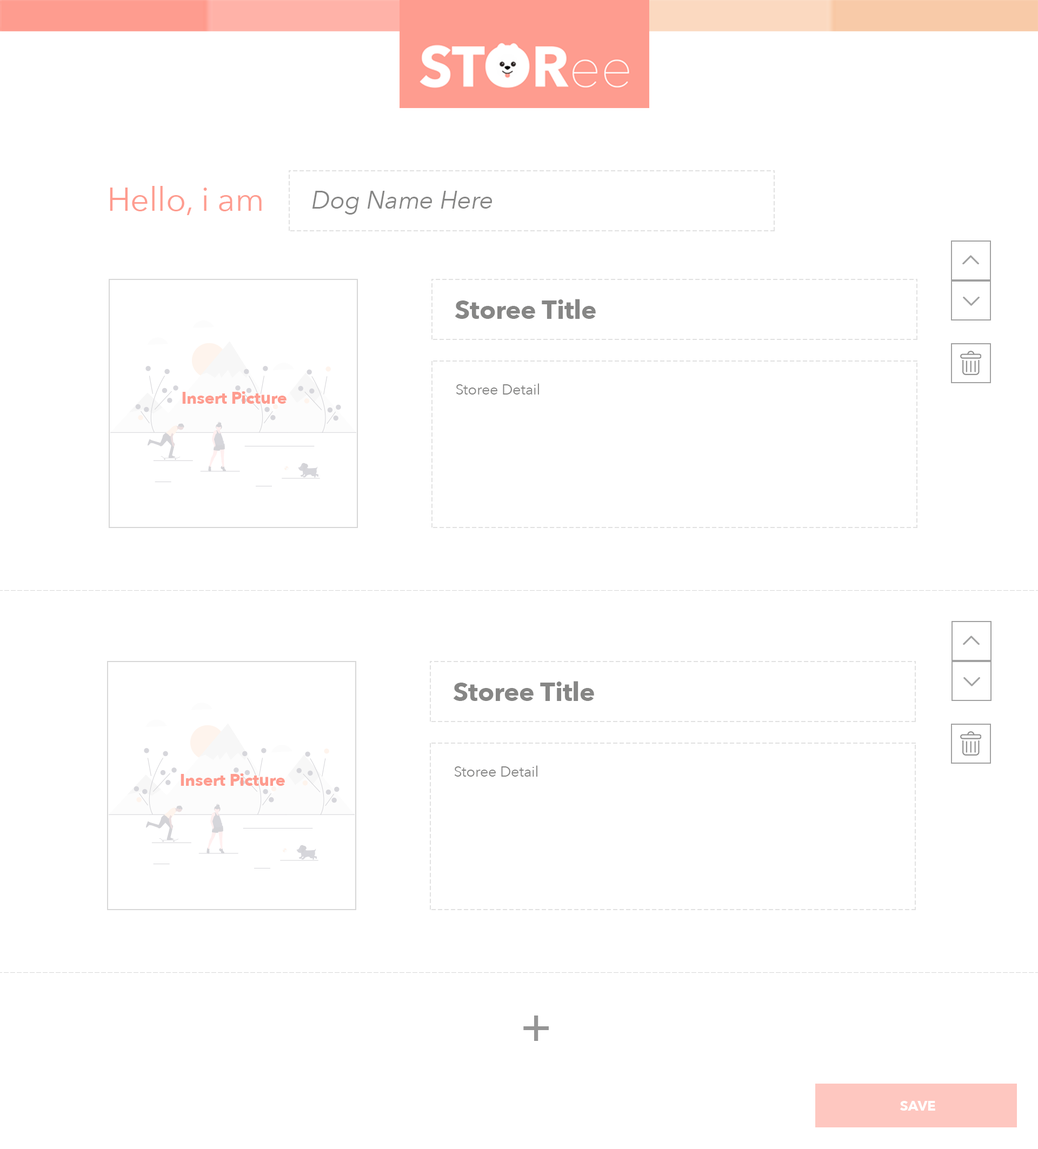
<style>
.page{position:relative;width:1038px;height:1149px;background:#ffffff}
.page>*{position:absolute;margin:0}
.t1{font:32.8px "AvenirNext-Regular";color:#fe9c8f}
.t2{font:24.6px "AvenirNext-Italic";color:#868685}
.t3{font:25.7px "AvenirNext-Bold";color:#868685}
.t4{font:14.4px "AvenirNext-Regular";color:#868685}
.t5{font:16.5px "AvenirNext-Bold";color:#fe9c8f}
.t6{font:47.9px "AvenirNext-Medium";color:#959595}
.t7{font:13.8px "AvenirNext-Bold";color:#ffffff}
</style>
<div class="page">
<p class="t1" style="left:110px;top:186px;width:152px;height:29px">Hello, i am</p>
<p class="t2" style="left:312px;top:191px;width:180px;height:24px">Dog Name Here</p>
<p class="t3" style="left:455px;top:299px;width:141px;height:20px">Storee Title</p>
<p class="t4" style="left:456px;top:383px;width:83px;height:12px">Storee Detail</p>
<p class="t5" style="left:182px;top:391px;width:104px;height:13px">Insert Picture</p>
<p class="t3" style="left:453px;top:681px;width:141px;height:20px">Storee Title</p>
<p class="t5" style="left:181px;top:773px;width:104px;height:13px">Insert Picture</p>
<p class="t4" style="left:454px;top:765px;width:83px;height:12px">Storee Detail</p>
<p class="t6" style="left:523px;top:1016px;width:26px;height:25px">+</p>
<p class="t7" style="left:899px;top:1101px;width:36px;height:10px">SAVE</p>
</div>
